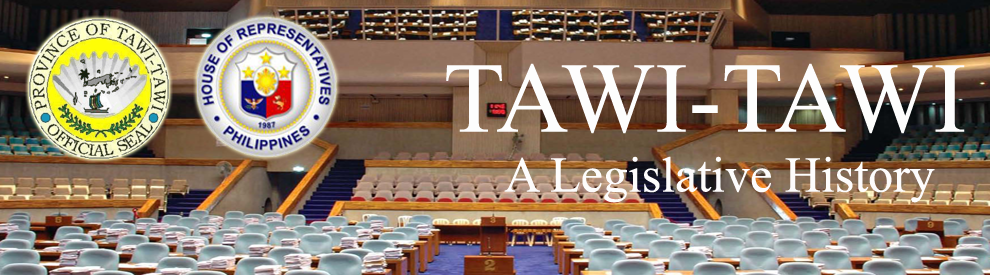
<style>
.page{position:relative;width:990px;height:275px}
.page>*{position:absolute;margin:0}
.t1{font:50px "TimesNewRomanPSMT";color:#fdfcfc}
.t2{font:100px "TimesNewRomanPSMT";color:#fdfdfd}
</style>
<div class="page">
<p class="t1" style="left:446px;top:63px;width:519px;height:140px;text-align:center"><span class="t2">TAWI-TAWI<br></span>A Legislative History</p>
</div>
